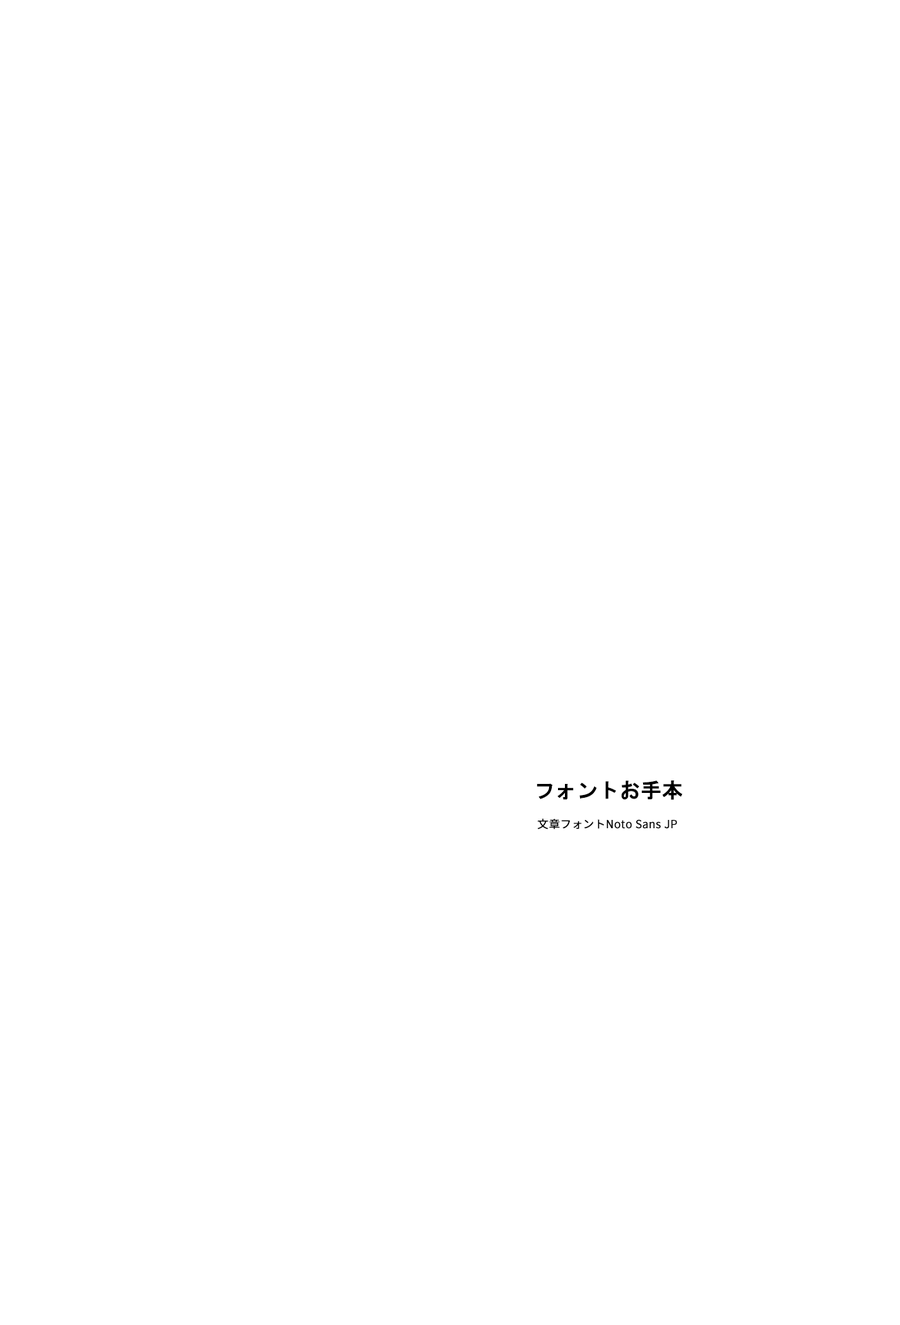
<style>
.page{position:relative;width:900px;height:1325px;background:#ffffff}
.page>*{position:absolute;margin:0}
.t1{font:20.8px "HGSGothicE";color:#000000;font-weight:bold}
.t2{font:11.1px "NotoSansCJKjp-Regular";color:#000000;font-weight:bold}
</style>
<div class="page">
<p class="t1" style="left:536px;top:781px;width:146px;height:19px">フォントお手本</p>
<p class="t2" style="left:537px;top:819px;width:140px;height:11px">文章フォントNoto Sans JP</p>
</div>
